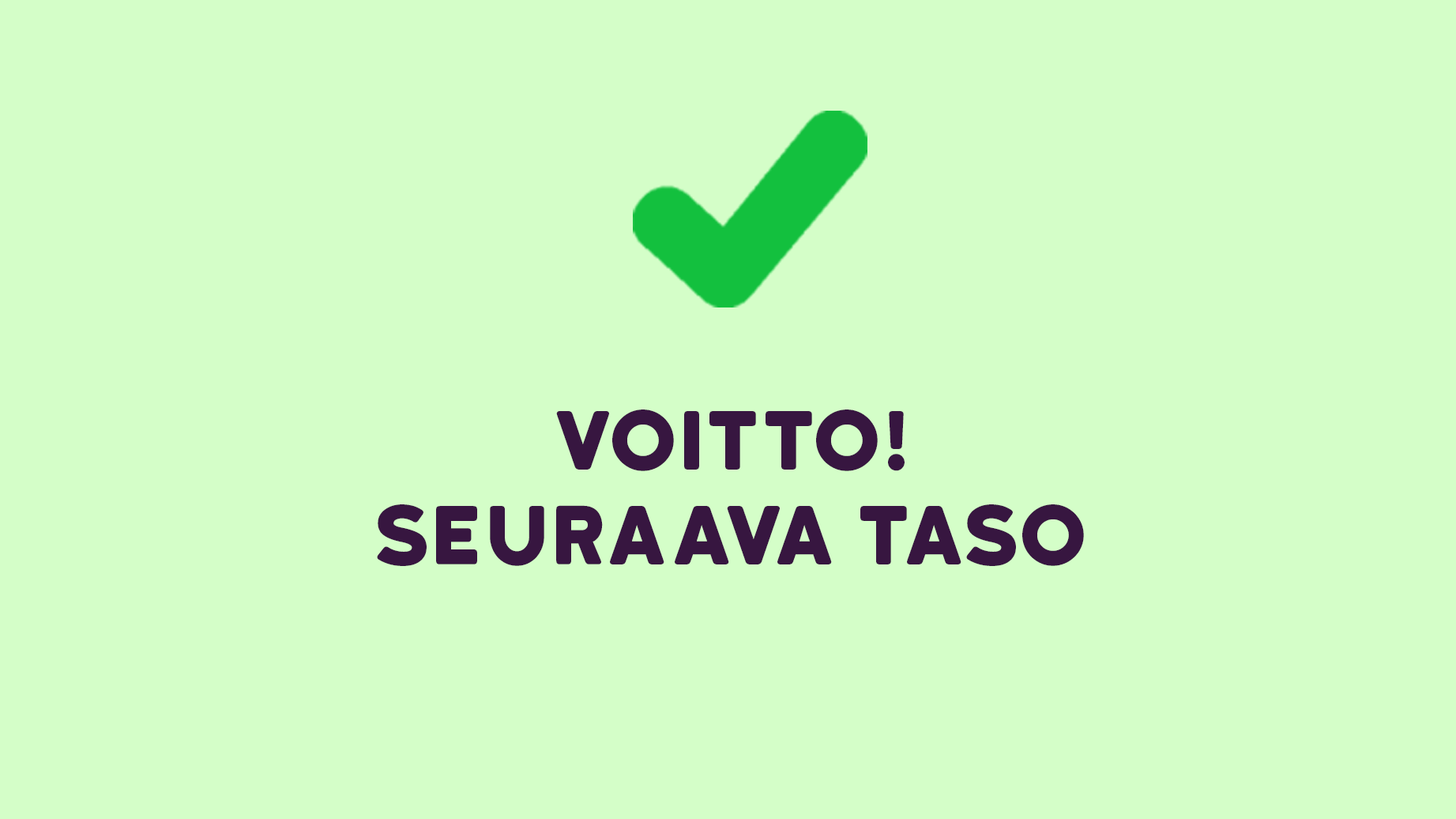
<style>
.page{position:relative;width:1456px;height:819px;background:#d4fec8}
.page>*{position:absolute;margin:0}
.t1{font:79px "KatahdinRound-Regular";color:#371640}
</style>
<div class="page">
<p class="t1" style="left:377px;top:409px;width:707px;height:157px;text-align:center">Voitto!<br>Seuraava taso</p>
</div>
